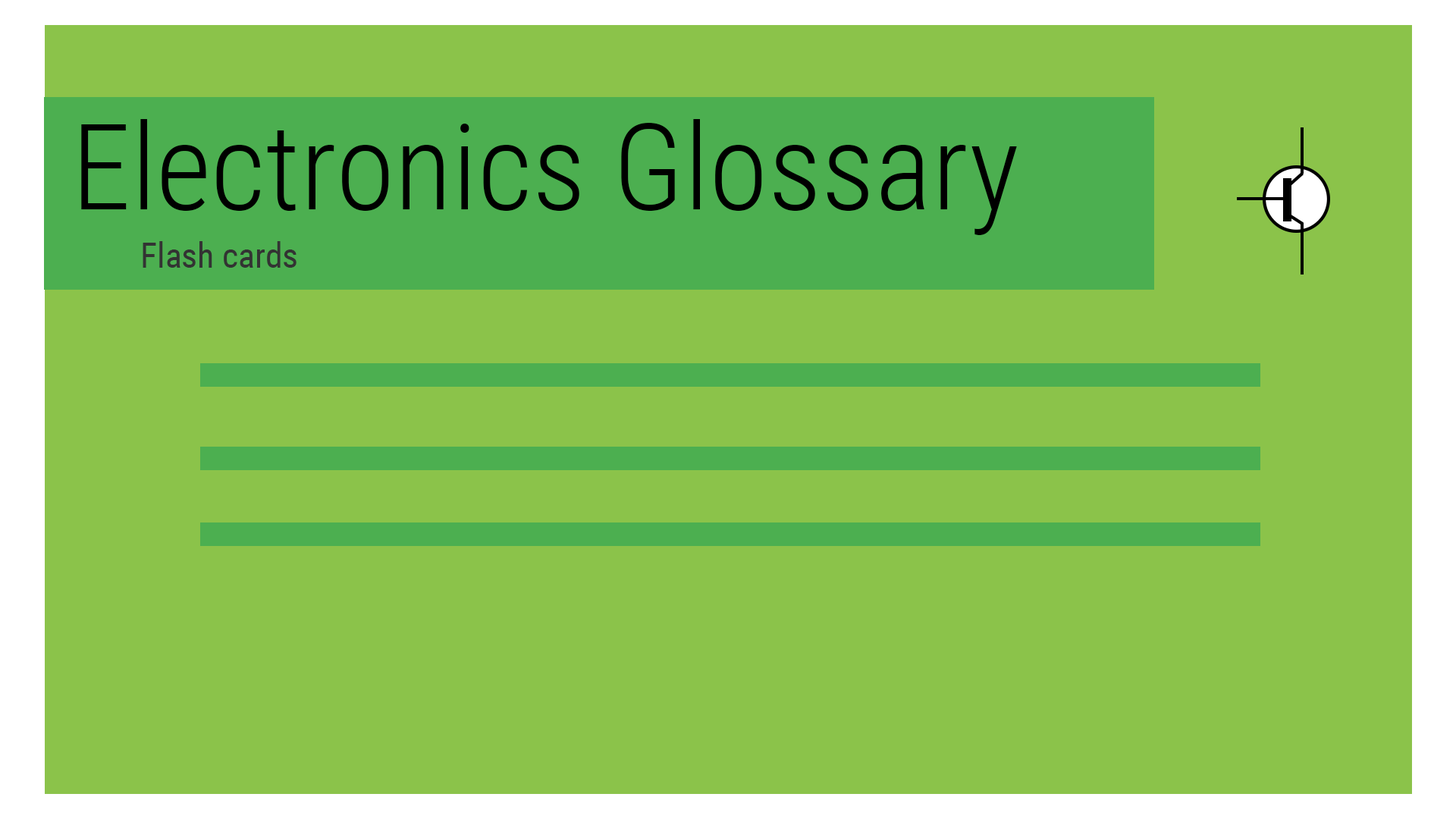
<style>
.page{position:relative;width:1456px;height:819px;background:#8bc34a}
.page>*{position:absolute;margin:0}
.t1{font:120.1px "RobotoCondensed-Light";color:#000000}
.t2{font:34.8px "RobotoCondensed-Regular";color:#333333}
</style>
<div class="page">
<p class="t1" style="left:81px;top:119px;width:936px;height:116px">Electronics Glossary</p>
<p class="t2" style="left:143px;top:241px;width:154px;height:27px">Flash cards</p>
</div>
